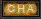
<style>
.page{position:relative;width:41px;height:19px}
.page>*{position:absolute;margin:0}
.t1{font:10.5px "Helvetica-Light";letter-spacing:0.2em;color:#f6cc97}
</style>
<div class="page">
<p class="t1" style="left:8px;top:5px;width:26px;height:7px">CHA</p>
</div>
